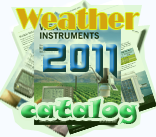
<style>
.page{position:relative;width:156px;height:137px}
.page>*{position:absolute;margin:0}
.t1{font:27.9px "BroadwayBT-Regular";color:#e99709;scale:0.91 1}
.t2{font:40px "Origicide";scale:1.09 1}
.t3{font:25.3px "SnapITC-Regular";scale:1.13 1}
</style>
<div class="page">
<p class="t1" style="left:16px;top:8px;width:123px;height:21px">Weather</p>
<p class="t2" style="left:43px;top:44px;width:74px;height:35px">2011</p>
<p class="t3" style="left:21px;top:99px;width:116px;height:25px">catalog</p>
</div>
